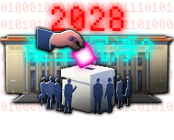
<style>
.page{position:relative;width:174px;height:140px;background:#ffffff}
.page>*{position:absolute;margin:0}
.t1{font:35.5px "HYPixel-11px-U";color:#ff0501}
.t2{font:29.2px "HYPixel-11px-U";color:#01ffea}
</style>
<div class="page">
<p class="t1" style="left:51px;top:6px;width:73px;height:25px">2028</p>
<p class="t2" style="left:24px;top:36px;width:129px;height:26px">谁主沉浮?</p>
</div>
